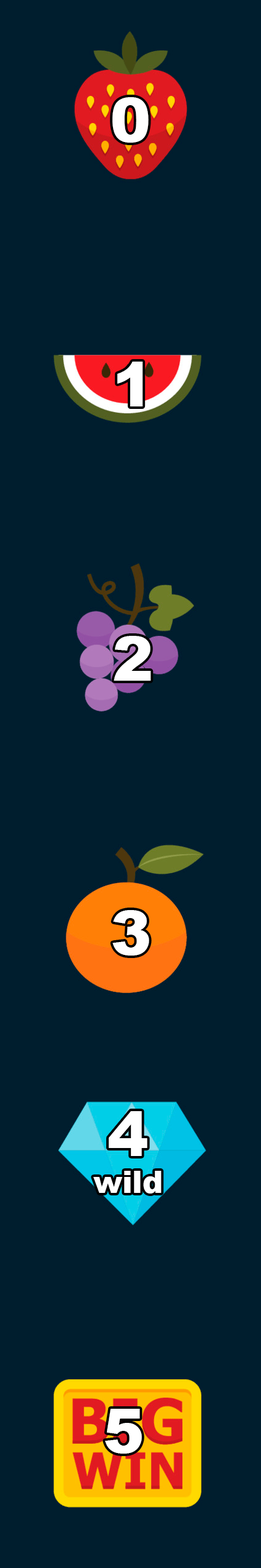
<style>
.page{position:relative;width:261px;height:1568px;background:#001e2e}
.page>*{position:absolute;margin:0}
.t1{font:61.5px "Arial-Black";color:#ffffff}
.t2{font:30.7px "Arial-Black";color:#ffffff}
</style>
<div class="page">
<p class="t1" style="left:113px;top:97px;width:36px;height:46px">0</p>
<p class="t1" style="left:117px;top:362px;width:26px;height:44px">1</p>
<p class="t1" style="left:114px;top:636px;width:37px;height:45px">2</p>
<p class="t1" style="left:113px;top:910px;width:36px;height:46px">3</p>
<p class="t2" style="left:93px;top:1111px;width:69px;height:83px;text-align:center"><span class="t1">4<br></span>wild</p>
<p class="t1" style="left:105px;top:1409px;width:37px;height:45px">5</p>
</div>
